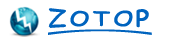
<style>
.page{position:relative;width:190px;height:40px;background:#ffffff}
.page>*{position:absolute;margin:0}
.t1{font:26px "ComicSansMS";letter-spacing:0.1em;color:#0063be;text-transform:uppercase;text-decoration:underline}
</style>
<div class="page">
<p class="t1" style="left:48px;top:8px;width:104px;height:27px">ZOTOP</p>
</div>
